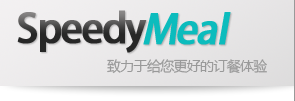
<style>
.page{position:relative;width:295px;height:101px}
.page>*{position:absolute;margin:0}
.t1{font:40px "AdobeHeitiStd-Regular";letter-spacing:-0.05em;font-weight:bold}
.t2{font:40px "AdobeHeitiStd-Regular";letter-spacing:-0.05em;color:#0cbcbd;font-weight:bold;font-style:italic}
.t3{font:14px "MicrosoftYaHei";letter-spacing:-0.05em;color:#999999}
</style>
<div class="page">
<p class="t1" style="left:17px;top:10px;width:130px;height:43px">Speedy</p>
<p class="t2" style="left:143px;top:12px;width:88px;height:33px">Meal</p>
<p class="t3" style="left:107px;top:59px;width:160px;height:15px">致力于给您更好的订餐体验</p>
</div>
